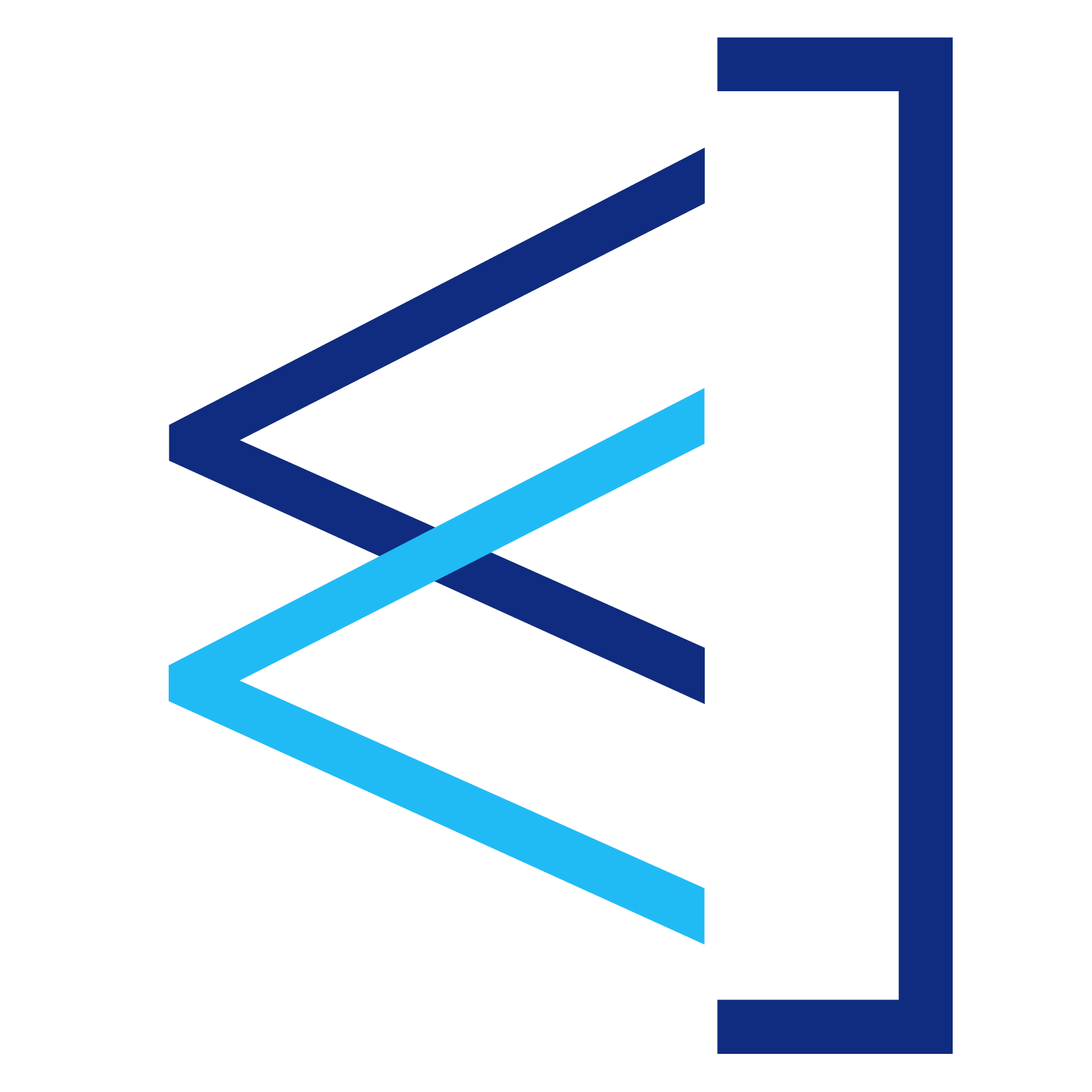
<style>
.page{position:relative;width:1092px;height:1092px;background:#ffffff}
.page>*{position:absolute;margin:0}
.t1{font:1165.2px "OpenSans-Light";color:#0f2c80;scale:0.97 1}
.t2{font:1198px "OpenSans-Light";color:#0f2c80;scale:0.97 1}
.t3{font:1198px "OpenSans-Light";color:#20bbf5;scale:0.97 1}
</style>
<div class="page">
<p class="t1" style="left:717px;top:37px;width:236px;height:1017px">]</p>
<p class="t2" style="left:169px;top:147px;width:536px;height:557px">&lt;</p>
<p class="t3" style="left:169px;top:388px;width:536px;height:557px">&lt;</p>
</div>
